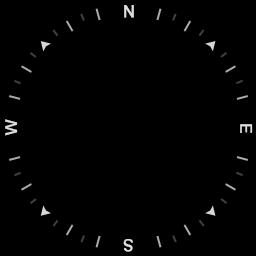
<style>
.page{position:relative;width:256px;height:256px;background:#000000}
.page>*{position:absolute;margin:0}
.t1{font:16px "ArialMT";color:#dddddd;font-weight:bold}
.t2{font:16px "ArialMT";color:#dddddd;font-weight:bold;scale:0.97 1}
</style>
<div class="page">
<p class="t1" style="left:124px;top:5px;width:10px;height:13px">N</p>
<p class="t1" style="left:5px;top:119px;width:13px;height:17px;rotate:-90deg">W</p>
<p class="t2" style="left:240px;top:124px;width:13px;height:9px;rotate:90deg">E</p>
<p class="t2" style="left:123px;top:239px;width:10px;height:13px;rotate:180deg">S</p>
</div>
